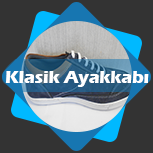
<style>
.page{position:relative;width:153px;height:153px;background:#333333}
.page>*{position:absolute;margin:0}
.t1{font:17.5px "ErasITC-Bold";color:#ffffff}
</style>
<div class="page">
<p class="t1" style="left:5px;top:71px;width:144px;height:16px">Klasik Ayakkabı</p>
</div>
